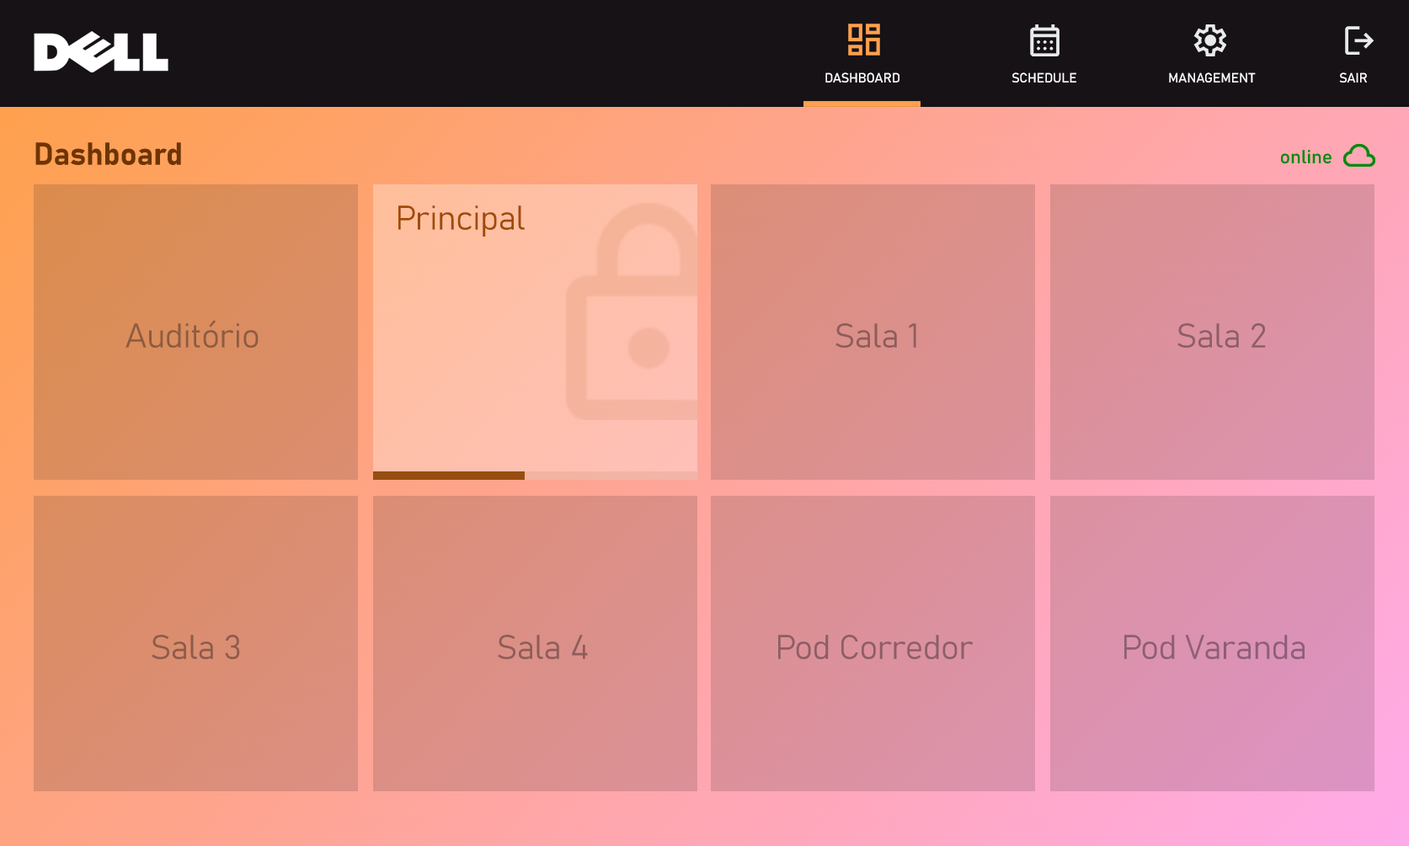
<style>
.page{position:relative;width:1409px;height:846px}
.page>*{position:absolute;margin:0}
.t1{font:13.5px "Bahnschrift";letter-spacing:-0.01em;color:#ffffff}
.t2{font:31.4px "Bahnschrift-Bold";letter-spacing:-0.01em;color:#6f3400}
.t3{font:18.8px "Bahnschrift";letter-spacing:-0.01em;color:#008b0d;scale:1.04 1}
.t4{font:33.7px "Bahnschrift-Light";letter-spacing:-0.01em;color:#a14a00}
.t5{font:33.7px "Bahnschrift-Light";letter-spacing:-0.01em;color:#8c5c41}
.t6{font:33.7px "Bahnschrift-Light";letter-spacing:-0.01em;color:#8c5e5b}
.t7{font:33.7px "Bahnschrift-Light";letter-spacing:-0.01em;color:#8d5e68}
.t8{font:33.7px "Bahnschrift-Light";letter-spacing:-0.01em;color:#8c5c4c}
.t9{font:33.7px "Bahnschrift-Light";letter-spacing:-0.01em;color:#8c5d59}
.t10{font:33.7px "Bahnschrift-Light";letter-spacing:-0.01em;color:#8d5e66}
.t11{font:33.7px "Bahnschrift-Light";letter-spacing:-0.01em;color:#8d5f73}
</style>
<div class="page">
<p class="t1" style="left:825px;top:72px;width:74px;height:11px">DASHBOARD</p>
<p class="t1" style="left:1011px;top:72px;width:65px;height:11px">SCHEDULE</p>
<p class="t1" style="left:1169px;top:72px;width:87px;height:11px">MANAGEMENT</p>
<p class="t1" style="left:1339px;top:72px;width:28px;height:11px">SAIR</p>
<p class="t2" style="left:35px;top:142px;width:146px;height:23px">Dashboard</p>
<p class="t3" style="left:1281px;top:150px;width:50px;height:14px">online</p>
<p class="t4" style="left:398px;top:205px;width:127px;height:32px">Principal</p>
<p class="t5" style="left:125px;top:320px;width:134px;height:28px">Auditório</p>
<p class="t6" style="left:835px;top:323px;width:81px;height:25px">Sala 1</p>
<p class="t7" style="left:1177px;top:323px;width:89px;height:25px">Sala 2</p>
<p class="t8" style="left:152px;top:635px;width:88px;height:24px">Sala 3</p>
<p class="t9" style="left:498px;top:635px;width:90px;height:24px">Sala 4</p>
<p class="t10" style="left:778px;top:635px;width:196px;height:24px">Pod Corredor</p>
<p class="t11" style="left:1124px;top:635px;width:180px;height:24px">Pod Varanda</p>
</div>
